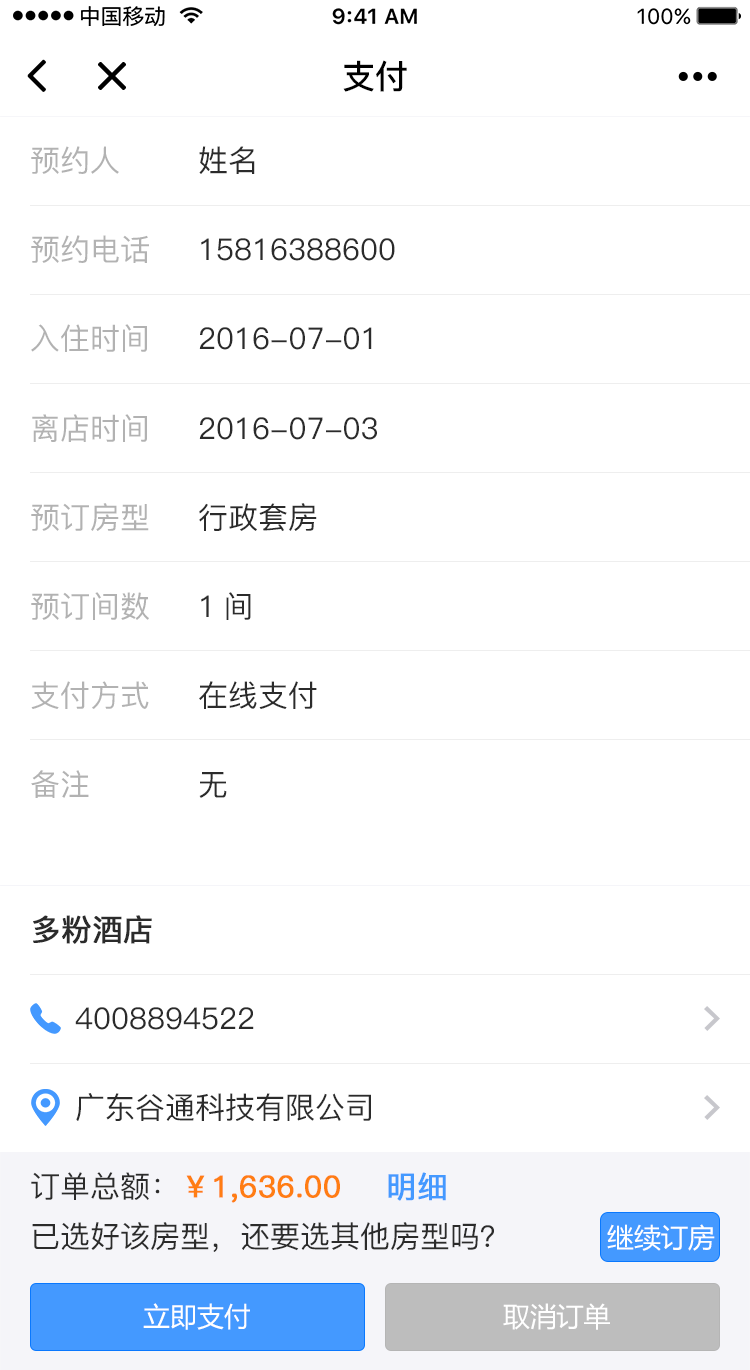
<style>
.page{position:relative;width:750px;height:1370px;background:#ffffff}
.page>*{position:absolute;margin:0}
.t1{font:33.2px "PingFang-SC-Bold";color:#000000}
.t2{font:30px "PingFang-SC-Medium";color:#b2b2b2}
.t3{font:30px "PingFang-SC-Medium";color:#2b2b2b}
.t4{font:30px "PingFang-SC-Medium";color:#2b2b2b;font-weight:bold}
.t5{font:30px "PingFang-SC-Medium";color:#ff7d13;font-weight:bold}
.t6{font:30px "PingFang-SC-Medium";color:#4499ff;font-weight:bold}
.t7{font:27px "MicrosoftYaHei";color:#ffffff}
</style>
<div class="page">
<p class="t1" style="left:343px;top:60px;width:64px;height:32px">支付</p>
<p class="t2" style="left:31px;top:146px;width:88px;height:28px">预约人</p>
<p class="t3" style="left:199px;top:146px;width:56px;height:28px">姓名</p>
<p class="t2" style="left:31px;top:235px;width:118px;height:28px">预约电话</p>
<p class="t3" style="left:201px;top:238px;width:194px;height:23px">15816388600</p>
<p class="t2" style="left:31px;top:324px;width:116px;height:28px">入住时间</p>
<p class="t3" style="left:199px;top:327px;width:173px;height:23px">2016-07-01</p>
<p class="t2" style="left:32px;top:414px;width:115px;height:28px">离店时间</p>
<p class="t3" style="left:199px;top:417px;width:178px;height:23px">2016-07-03</p>
<p class="t2" style="left:31px;top:503px;width:118px;height:28px">预订房型</p>
<p class="t3" style="left:199px;top:503px;width:118px;height:28px">行政套房</p>
<p class="t2" style="left:31px;top:592px;width:118px;height:28px">预订间数</p>
<p class="t3" style="left:201px;top:592px;width:50px;height:28px">1间</p>
<p class="t2" style="left:31px;top:681px;width:118px;height:28px">支付方式</p>
<p class="t3" style="left:199px;top:681px;width:118px;height:28px">在线支付</p>
<p class="t2" style="left:31px;top:770px;width:58px;height:28px">备注</p>
<p class="t3" style="left:199px;top:772px;width:28px;height:26px">无</p>
<p class="t4" style="left:33px;top:915px;width:119px;height:29px">多粉酒店</p>
<p class="t3" style="left:75px;top:1007px;width:179px;height:23px">4008894522</p>
<p class="t3" style="left:76px;top:1093px;width:295px;height:28px">广东谷通科技有限公司</p>
<p class="t5" style="left:31px;top:1172px;width:309px;height:31px"><span class="t3">订单总额：</span>￥1,636.00</p>
<p class="t6" style="left:388px;top:1172px;width:58px;height:29px">明细</p>
<p class="t3" style="left:32px;top:1222px;width:462px;height:30px">已选好该房型，还要选其他房型吗？</p>
<p class="t7" style="left:607px;top:1224px;width:108px;height:27px">继续订房</p>
<p class="t7" style="left:143px;top:1303px;width:107px;height:27px">立即支付</p>
<p class="t7" style="left:503px;top:1303px;width:107px;height:27px">取消订单</p>
</div>
